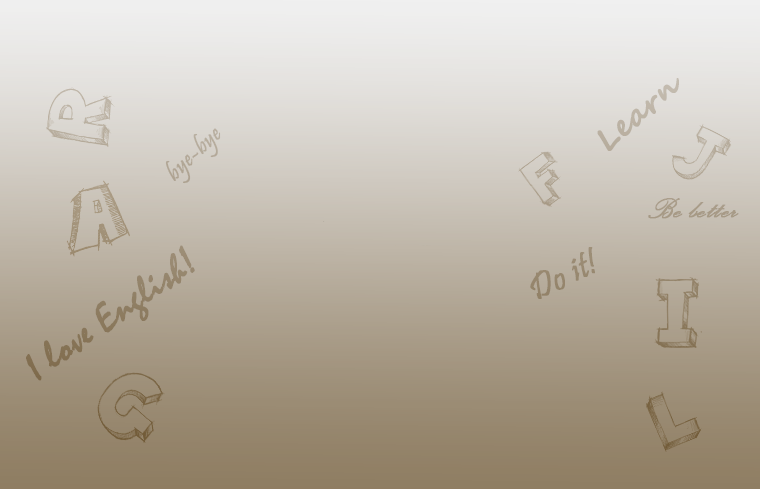
<style>
.page{position:relative;width:760px;height:489px}
.page>*{position:absolute;margin:0}
.t1{font:30px "SegoeScript-Bold";color:#bdb5a6;font-weight:bold}
.t2{font:24px "Pristina-Regular";color:#b4a999;font-weight:bold}
.t3{font:36px "PalaceScriptMT";color:#a79a86;font-weight:bold}
.t4{font:40px "Mistral";color:#8d7c61;font-weight:bold}
.t5{font:36px "Pristina-Regular";color:#97886f;font-weight:bold}
</style>
<div class="page">
<p class="t1" style="left:597px;top:78px;width:82px;height:73px;rotate:-40deg">Learn</p>
<p class="t2" style="left:165px;top:128px;width:56px;height:56px;rotate:-43deg">bye-bye</p>
<p class="t3" style="left:648px;top:198px;width:91px;height:21px">Be better</p>
<p class="t4" style="left:26px;top:245px;width:169px;height:136px;rotate:-35deg">I love English!</p>
<p class="t5" style="left:530px;top:247px;width:65px;height:52px;rotate:-26deg">Do it!</p>
</div>
